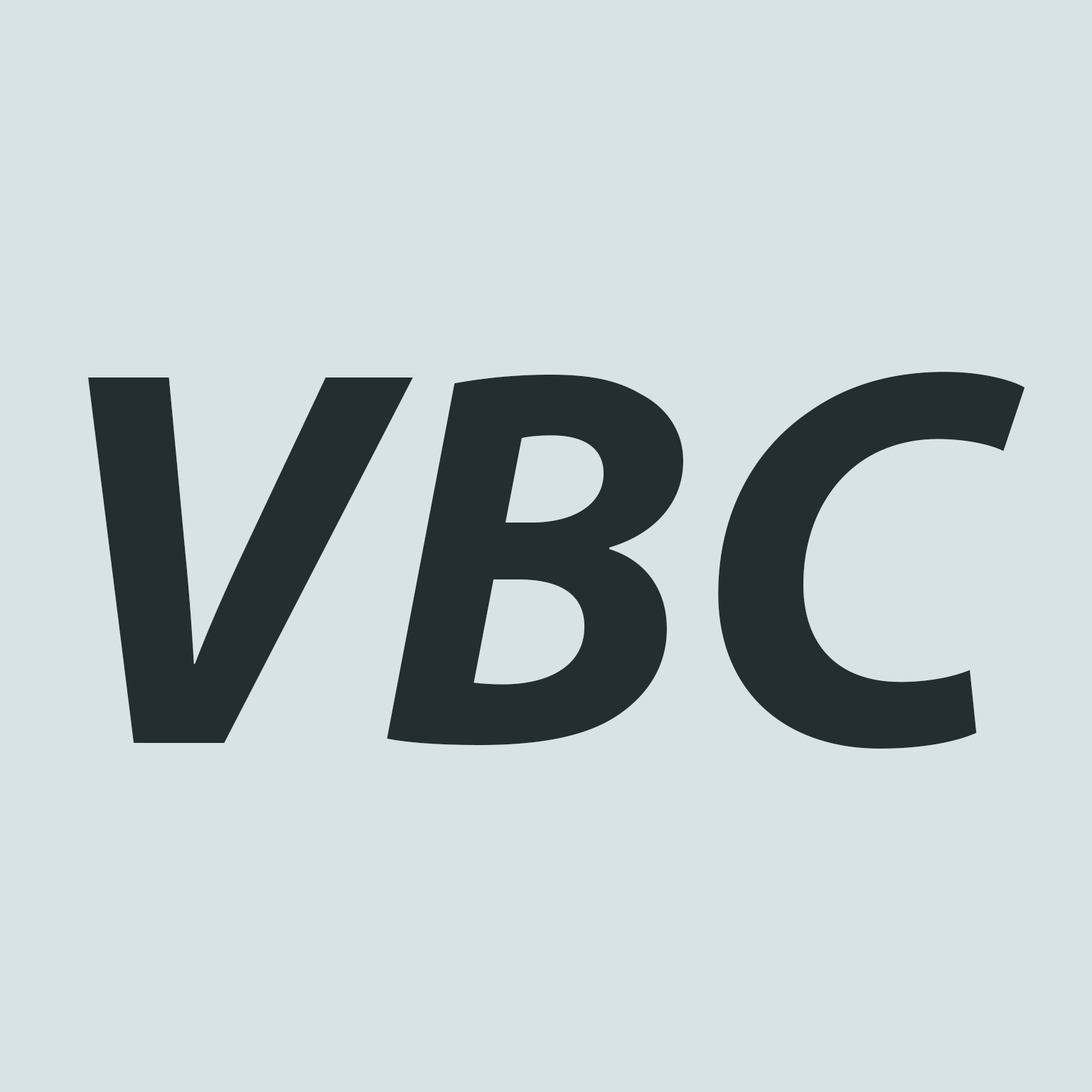
<style>
.page{position:relative;width:1092px;height:1092px;background:#d8e3e7}
.page>*{position:absolute;margin:0}
.t1{font:542.2px "MyriadPro-BoldIt";color:#242d30}
</style>
<div class="page">
<p class="t1" style="left:88px;top:372px;width:937px;height:377px">VBC</p>
</div>
